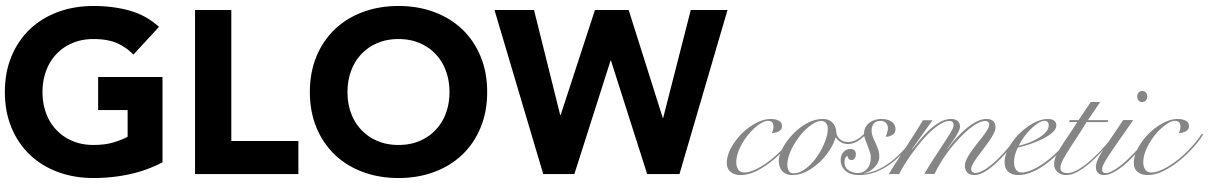
<style>
.page{position:relative;width:1209px;height:186px;background:#ffffff}
.page>*{position:absolute;margin:0}
.t1{font:232px "Avenir-Black";color:#000000}
.t2{font:156px "SnellRoundhand";color:#858585}
</style>
<div class="page">
<p class="t1" style="left:4px;top:6px;width:724px;height:172px">GLOW</p>
<p class="t2" style="left:726px;top:91px;width:477px;height:84px">cosmetic</p>
</div>
